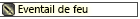
<style>
.page{position:relative;width:140px;height:19px;background:#ffffff}
.page>*{position:absolute;margin:0}
.t1{font:10.9px "LaoUI";color:#000000}
</style>
<div class="page">
<p class="t1" style="left:18px;top:5px;width:70px;height:8px">Eventail de feu</p>
</div>
